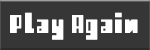
<style>
.page{position:relative;width:150px;height:50px;background:#363636}
.page>*{position:absolute;margin:0}
.t1{font:36px "Retro";color:#ffffff}
</style>
<div class="page">
<p class="t1" style="left:10px;top:12px;width:128px;height:28px">Play Again</p>
</div>
